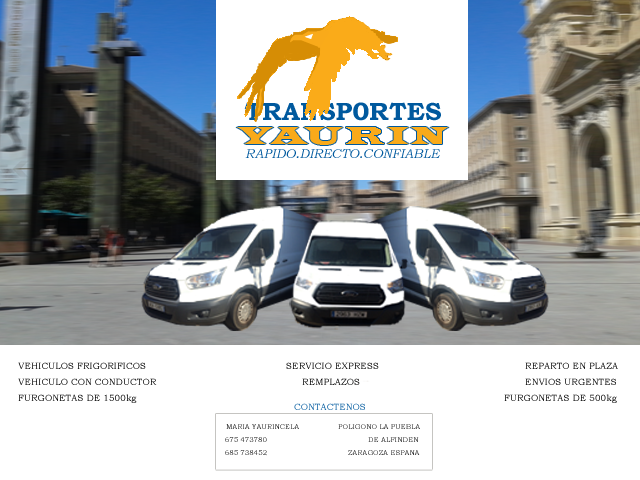
<style>
.page{position:relative;width:640px;height:480px;background:#ffffff}
.page>*{position:absolute;margin:0}
.t1{font:25px "BookmanOldStyle-Bold";letter-spacing:0.01em;color:#00599e}
.t2{font:26px "LatinWide";letter-spacing:0.025em;color:#f9aa1a}
.t3{font:13px "BookmanOldStyle-Italic";letter-spacing:0.005em;color:#00599e}
.t4{font:14px "BookmanOldStyle-Italic";letter-spacing:0.005em;color:#00599e}
.t5{font:9px "BookmanOldStyle";letter-spacing:0.01em}
.t6{font:7px "BookmanOldStyle";letter-spacing:0.01em}
</style>
<div class="page">
<p class="t1" style="left:244px;top:102px;width:197px;height:19px">TRANSP0RTES</p>
<p class="t2" style="left:236px;top:127px;width:38px;height:17px">Y</p>
<p class="t2" style="left:269px;top:127px;width:40px;height:17px">A</p>
<p class="t2" style="left:303px;top:127px;width:40px;height:18px">U</p>
<p class="t2" style="left:346px;top:127px;width:38px;height:17px">R</p>
<p class="t2" style="left:387px;top:127px;width:22px;height:17px">I</p>
<p class="t2" style="left:410px;top:127px;width:39px;height:17px">N</p>
<p class="t3" style="left:245px;top:149px;width:195px;height:9px">RAPIDO<span class="t4">.</span>DIRECTO<span class="t4">.</span>CONFIABLE</p>
<p class="t5" style="left:18px;top:362px;width:128px;height:7px">VEHICULOS FRIGORIFICOS</p>
<p class="t5" style="left:286px;top:362px;width:93px;height:7px">SERVICIO EXPRESS</p>
<p class="t5" style="left:525px;top:362px;width:93px;height:7px">REPARTO EN PLAZA</p>
<p class="t5" style="left:18px;top:378px;width:139px;height:7px">VEHICULO CON CONDUCTOR</p>
<p class="t5" style="left:302px;top:378px;width:58px;height:7px">REMPLAZOS</p>
<p class="t5" style="left:525px;top:378px;width:91px;height:7px">ENVIOS URGENTES</p>
<p class="t5" style="left:18px;top:394px;width:119px;height:9px">FURGONETAS DE 1500kg</p>
<p class="t5" style="left:504px;top:394px;width:113px;height:9px">FURGONETAS DE 500kg</p>
<p class="t5" style="left:294px;top:403px;width:71px;height:7px">CONTACTENOS</p>
<p class="t6" style="left:226px;top:424px;width:73px;height:5px">MARIA YAURINCELA</p>
<p class="t6" style="left:338px;top:424px;width:82px;height:5px">POLIGONO LA PUEBLA</p>
<p class="t6" style="left:225px;top:437px;width:42px;height:5px">675 473780</p>
<p class="t6" style="left:368px;top:437px;width:51px;height:5px">DE ALFINDEN</p>
<p class="t6" style="left:225px;top:450px;width:42px;height:6px">685 738452</p>
<p class="t6" style="left:348px;top:450px;width:72px;height:5px">ZARAGOZA ESPANA</p>
</div>
